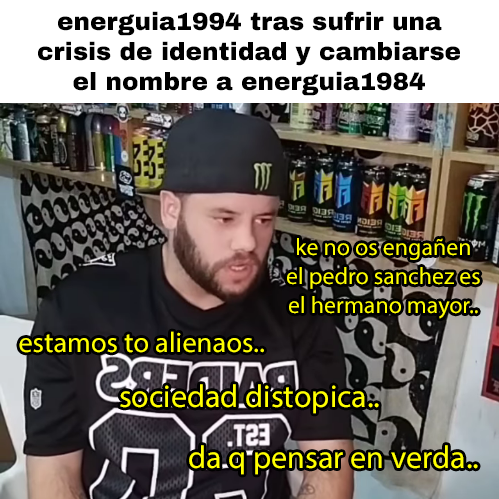
<style>
.page{position:relative;width:499px;height:499px}
.page>*{position:absolute;margin:0}
.t1{font:24.7px "ArchivoBlack-Regular";color:#000000}
.t2{font:23.9px "MyriadPro-Regular";color:#ffff00}
.t3{font:28.6px "MyriadPro-Regular";color:#ffff00}
.t4{font:32px "MyriadPro-Regular";color:#ffff00}
</style>
<div class="page">
<p class="t1" style="left:38px;top:11px;width:422px;height:85px;text-align:center">energuia1994 tras sufrir una<br>crisis de identidad y cambiarse<br>el nombre a energuia1984</p>
<p class="t2" style="left:287px;top:238px;width:193px;height:81px;text-align:center">ke no os engañen<br>el pedro sanchez es<br>el hermano mayor..</p>
<p class="t3" style="left:19px;top:331px;width:245px;height:22px">estamos to alienaos..</p>
<p class="t4" style="left:120px;top:384px;width:259px;height:30px">sociedad distopica..</p>
<p class="t4" style="left:189px;top:445px;width:289px;height:30px">da q pensar en verda..</p>
</div>
